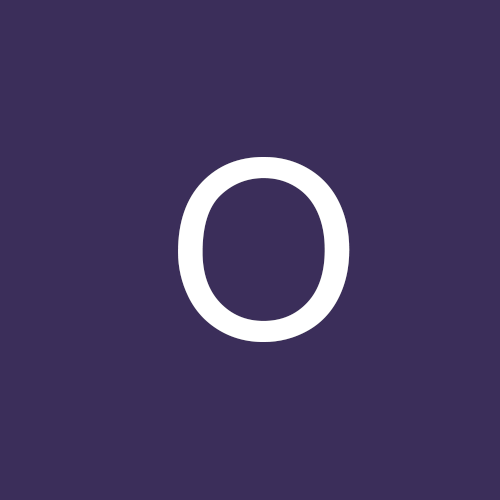
<style>
.page{position:relative;width:500px;height:500px;background:#3b2e5a}
.page>*{position:absolute;margin:0}
.t1{font:250px "ArialMT";color:#ffffff}
</style>
<div class="page">
<p class="t1" style="left:178px;top:157px;width:172px;height:185px">O</p>
</div>
